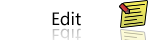
<style>
.page{position:relative;width:150px;height:40px;background:#ffffff}
.page>*{position:absolute;margin:0}
.t1{font:18px "SegoeUI";color:#000000}
</style>
<div class="page">
<p class="t1" style="left:52px;top:11px;width:29px;height:15px">Edit</p>
</div>
